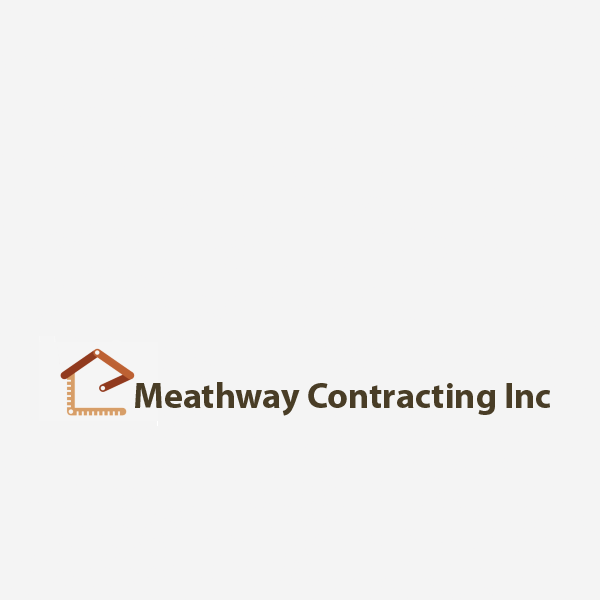
<style>
.page{position:relative;width:600px;height:600px;background:#f4f4f4}
.page>*{position:absolute;margin:0}
.t1{font:36px "MyriadPro-Bold";color:#493d26}
</style>
<div class="page">
<p class="t1" style="left:135px;top:382px;width:415px;height:34px">Meathway Contracting Inc</p>
</div>
